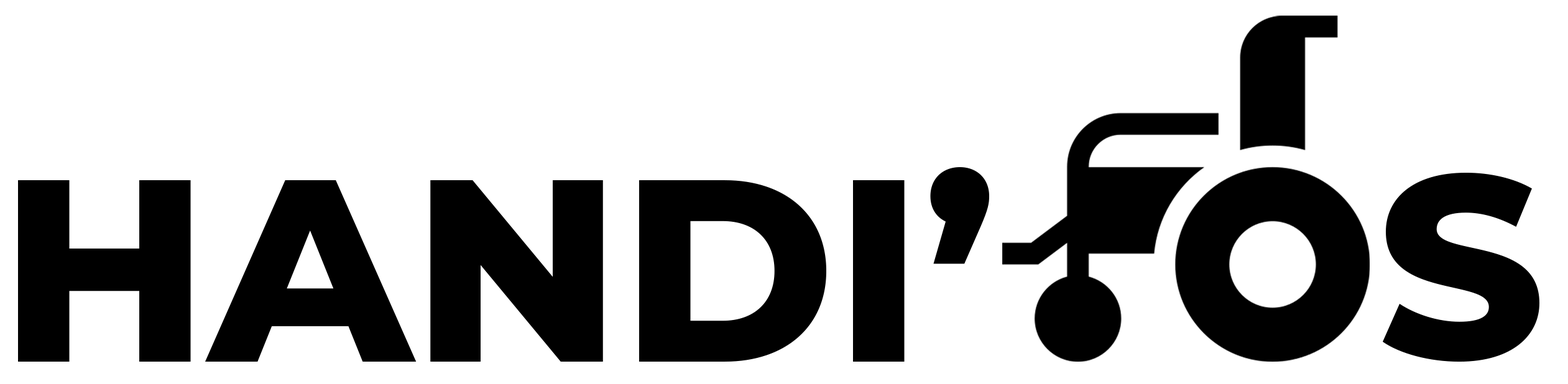
<style>
.page{position:relative;width:1568px;height:384px;background:#ffffff}
.page>*{position:absolute;margin:0}
.t1{font:259.1px "Montserrat-ExtraBold";color:#000000;text-transform:uppercase}
</style>
<div class="page">
<p class="t1" style="left:18px;top:167px;width:971px;height:195px">Handi’</p>
<p class="t1" style="left:1383px;top:173px;width:156px;height:189px">S</p>
</div>
